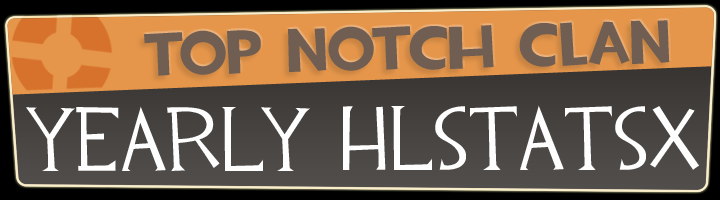
<style>
.page{position:relative;width:720px;height:200px}
.page>*{position:absolute;margin:0}
.t1{font:61.6px "TF2Build";color:#705e53}
.t2{font:91.2px "TF2";color:#fefefe}
</style>
<div class="page">
<p class="t1" style="left:144px;top:20px;width:526px;height:56px;rotate:-1deg">top notch clan</p>
<p class="t2" style="left:26px;top:105px;width:673px;height:66px">yearly Hlstatsx</p>
</div>
